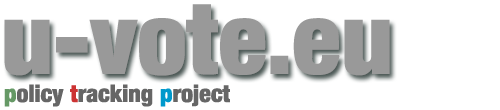
<style>
.page{position:relative;width:500px;height:110px;background:#ffffff}
.page>*{position:absolute;margin:0}
.t1{font:99.7px "Harvest";color:#999999}
.t2{font:24px "Harvest";color:#666666}
.t3{font:24px "Harvest";color:#669966}
.t4{font:24px "Harvest";color:#cc3333}
.t5{font:24px "Harvest";color:#0099cc}
</style>
<div class="page">
<p class="t1" style="left:4px;top:4px;width:386px;height:72px">u-vote.eu</p>
<p class="t2" style="left:4px;top:84px;width:226px;height:23px"><span class="t3">p</span>olicy <span class="t4">t</span>racking <span class="t5">p</span>roject</p>
</div>
